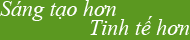
<style>
.page{position:relative;width:190px;height:40px;background:#5b9820}
.page>*{position:absolute;margin:0}
.t1{font:22px "TimesNewRomanPS-ItalicMT";color:#ffffff}
</style>
<div class="page">
<p class="t1" style="left:0px;top:0px;width:116px;height:21px">Sáng tạo hơn</p>
<p class="t1" style="left:90px;top:16px;width:99px;height:19px">Tinh tế hơn</p>
</div>
